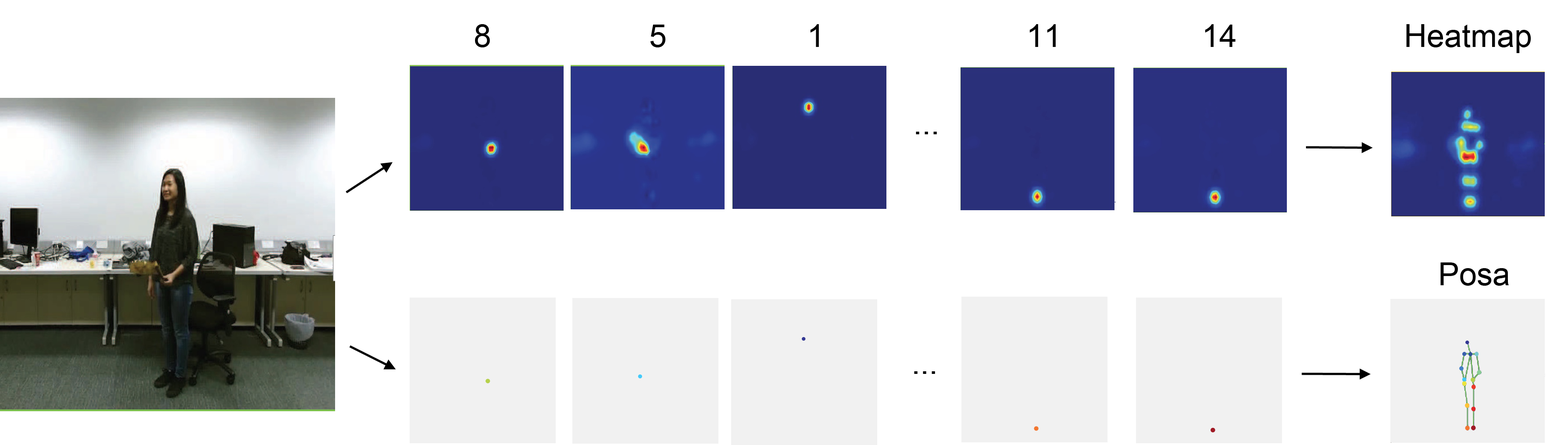
<style>
.page{position:relative;width:1568px;height:445px;background:#ffffff}
.page>*{position:absolute;margin:0}
.t1{font:31.6px "ArialMT";color:#000000}
</style>
<div class="page">
<p class="t1" style="left:475px;top:24px;width:1056px;height:29px">8                  5                1                       11                14                   Heatmap</p>
<p class="t1" style="left:916px;top:132px;width:21px;height:2px">...</p>
<p class="t1" style="left:1440px;top:262px;width:69px;height:24px">Posa</p>
<p class="t1" style="left:914px;top:371px;width:21px;height:3px">...</p>
</div>
